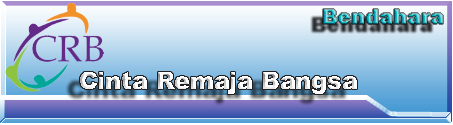
<style>
.page{position:relative;width:453px;height:125px}
.page>*{position:absolute;margin:0}
.t1{font:21px "Arial-Black"}
.t2{font:23.8px "Arial-Black"}
</style>
<div class="page">
<p class="t1" style="left:323px;top:9px;width:120px;height:15px">Bendahara</p>
<p class="t2" style="left:80px;top:72px;width:277px;height:22px">Cinta Remaja Bangsa</p>
</div>
